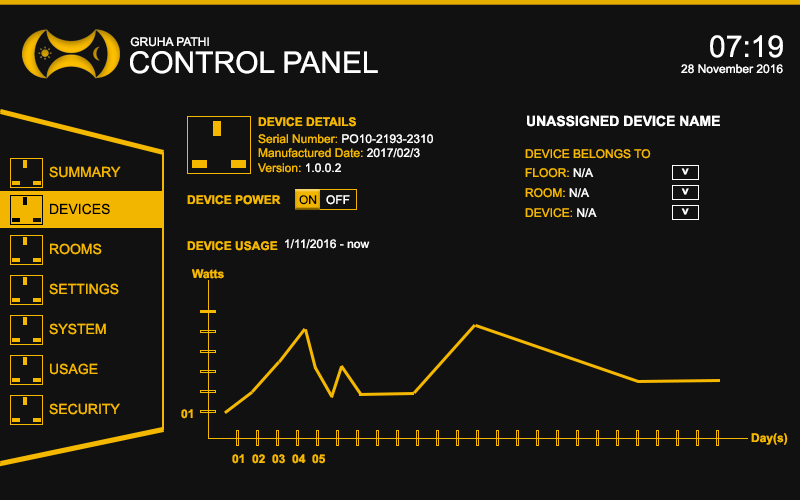
<style>
.page{position:relative;width:800px;height:500px;background:#111111}
.page>*{position:absolute;margin:0}
.t1{font:12px "ArialMT";color:#ffffff}
.t2{font:30px "ArialMT";color:#ffffff}
.t3{font:12px "Arial-BoldMT";color:#f5b800}
.t4{font:14px "Arial-BoldMT";color:#ffffff}
.t5{font:12px "ArialMT";color:#f5b800}
.t6{font:14px "ArialMT";color:#f2b600}
.t7{font:12px "Arial-BoldMT";color:#ffffff}
.t8{font:12px "ArialMT";color:#000000}
.t9{font:14px "ArialMT";color:#000000}
.t10{font:14px "ArialMT";color:#f5b800}
</style>
<div class="page">
<p class="t1" style="left:130px;top:37px;width:79px;height:10px">GRUHA PATHI</p>
<p class="t2" style="left:710px;top:35px;width:73px;height:23px">07:19</p>
<p class="t2" style="left:130px;top:51px;width:248px;height:23px">CONTROL PANEL</p>
<p class="t1" style="left:681px;top:64px;width:102px;height:10px">28 November 2016</p>
<p class="t3" style="left:258px;top:117px;width:98px;height:10px">DEVICE DETAILS</p>
<p class="t4" style="left:527px;top:115px;width:193px;height:12px">UNASSIGNED DEVICE NAME</p>
<p class="t5" style="left:258px;top:134px;width:175px;height:10px">Serial Number: <span class="t1">PO10-2193-2310</span></p>
<p class="t5" style="left:258px;top:148px;width:162px;height:10px">Manufactured Date: <span class="t1">2017/02/3</span></p>
<p class="t5" style="left:525px;top:149px;width:126px;height:10px">DEVICE BELONGS TO</p>
<p class="t6" style="left:49px;top:166px;width:72px;height:12px">SUMMARY</p>
<p class="t5" style="left:258px;top:163px;width:83px;height:10px">Version: <span class="t1">1.0.0.2</span></p>
<p class="t5" style="left:525px;top:168px;width:69px;height:10px">FLOOR: <span class="t1">N/A</span></p>
<p class="t7" style="left:681px;top:168px;width:8px;height:7px;rotate:-90deg">&lt;</p>
<p class="t3" style="left:187px;top:195px;width:94px;height:10px">DEVICE POWER</p>
<p class="t8" style="left:299px;top:195px;width:18px;height:10px">ON</p>
<p class="t1" style="left:326px;top:195px;width:24px;height:10px">OFF</p>
<p class="t5" style="left:525px;top:188px;width:65px;height:10px">ROOM: <span class="t1">N/A</span></p>
<p class="t7" style="left:681px;top:188px;width:8px;height:7px;rotate:-90deg">&lt;</p>
<p class="t9" style="left:50px;top:203px;width:60px;height:12px">DEVICES</p>
<p class="t5" style="left:525px;top:208px;width:72px;height:10px">DEVICE: <span class="t1">N/A</span></p>
<p class="t7" style="left:681px;top:208px;width:8px;height:7px;rotate:-90deg">&lt;</p>
<p class="t10" style="left:50px;top:243px;width:52px;height:12px">ROOMS</p>
<p class="t3" style="left:187px;top:241px;width:91px;height:10px">DEVICE USAGE</p>
<p class="t1" style="left:285px;top:239px;width:85px;height:10px">1/11/2016 - now</p>
<p class="t3" style="left:192px;top:269px;width:32px;height:10px">Watts</p>
<p class="t10" style="left:49px;top:283px;width:70px;height:12px">SETTINGS</p>
<p class="t10" style="left:49px;top:323px;width:57px;height:12px">SYSTEM</p>
<p class="t10" style="left:50px;top:363px;width:48px;height:12px">USAGE</p>
<p class="t10" style="left:49px;top:403px;width:71px;height:12px">SECURITY</p>
<p class="t3" style="left:181px;top:409px;width:12px;height:10px">01</p>
<p class="t3" style="left:751px;top:433px;width:37px;height:12px">Day(s)</p>
<p class="t3" style="left:232px;top:454px;width:12px;height:10px">01</p>
<p class="t3" style="left:252px;top:454px;width:13px;height:10px">02</p>
<p class="t3" style="left:272px;top:454px;width:13px;height:10px">03</p>
<p class="t3" style="left:292px;top:454px;width:14px;height:10px">04</p>
<p class="t3" style="left:312px;top:454px;width:13px;height:10px">05</p>
</div>
